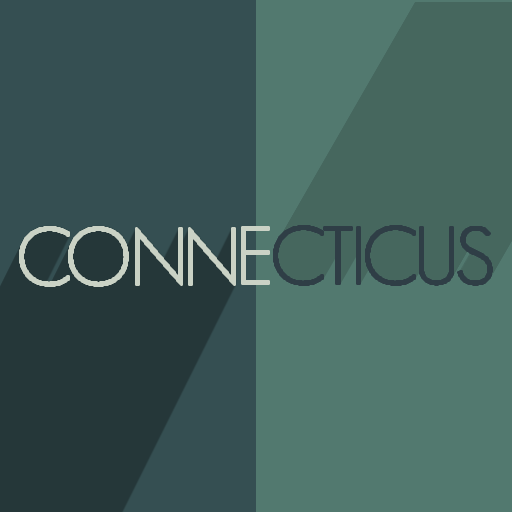
<style>
.page{position:relative;width:512px;height:512px;background:#52796f}
.page>*{position:absolute;margin:0}
.t1{font:80px "GeosansLight";color:#cad2c5}
.t2{font:80px "GeosansLight";color:#2f3e46}
</style>
<div class="page">
<p class="t1" style="left:20px;top:227px;width:215px;height:59px">CONN</p>
<p class="t1" style="left:242px;top:227px;width:27px;height:57px">E</p>
<p class="t2" style="left:274px;top:226px;width:218px;height:59px">CTICUS</p>
</div>
